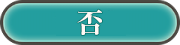
<style>
.page{position:relative;width:180px;height:45px;background:#239e9f}
.page>*{position:absolute;margin:0}
.t1{font:28px "RyuminPr6N-ExBold";color:#fff9f6}
</style>
<div class="page">
<p class="t1" style="left:77px;top:9px;width:25px;height:26px">否</p>
</div>
